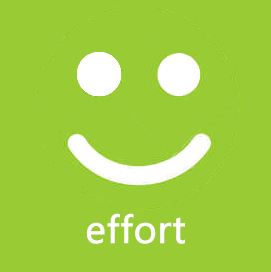
<style>
.page{position:relative;width:271px;height:272px;background:#99cb34}
.page>*{position:absolute;margin:0}
.t1{font:36px "MicrosoftYaHei";color:#ffffff;font-weight:bold}
</style>
<div class="page">
<p class="t1" style="left:86px;top:213px;width:99px;height:31px">effort</p>
</div>
